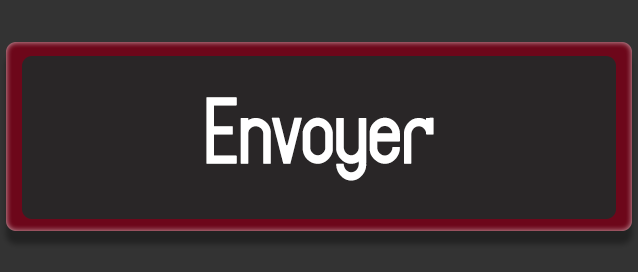
<style>
.page{position:relative;width:638px;height:272px;background:#292627}
.page>*{position:absolute;margin:0}
.t1{font:83.3px "Targa";color:#ffffff;scale:0.9 1}
</style>
<div class="page">
<p class="t1" style="left:206px;top:97px;width:228px;height:84px">Envoyer</p>
</div>
